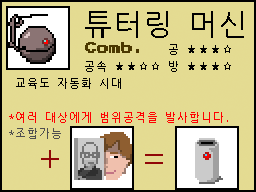
<style>
.page{position:relative;width:256px;height:192px;background:#e4db92}
.page>*{position:absolute;margin:0}
.t1{font:30px "NanumGothicCoding";color:#000000}
.t2{font:12px "PressStart2P";color:#4b3800}
.t3{font:11px "NanumGothicCoding";color:#000000}
.t4{font:11px "NanumGothicCoding";color:#ff0000}
.t5{font:11px "NanumGothicCoding";color:#4f4f4f}
.t6{font:36px "NanumGothicCoding";color:#900707}
</style>
<div class="page">
<p class="t1" style="left:85px;top:11px;width:159px;height:27px">튜터링 머신</p>
<p class="t2" style="left:85px;top:42px;width:54px;height:11px">Comb.</p>
<p class="t3" style="left:169px;top:44px;width:62px;height:11px">공 ★★★☆</p>
<p class="t3" style="left:85px;top:61px;width:146px;height:11px">공속 ★★☆☆ 방 ★★★☆</p>
<p class="t3" style="left:16px;top:78px;width:105px;height:11px">교육도 자동화 시대</p>
<p class="t4" style="left:9px;top:112px;width:219px;height:11px">*여러 대상에게 범위공격을 발사합니다.</p>
<p class="t5" style="left:9px;top:128px;width:52px;height:11px">*조합가능</p>
<p class="t6" style="left:41px;top:150px;width:18px;height:18px">+</p>
<p class="t6" style="left:145px;top:154px;width:18px;height:10px">=</p>
</div>
